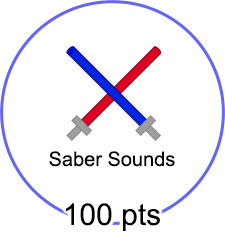
<style>
.page{position:relative;width:225px;height:236px;background:#ffffff}
.page>*{position:absolute;margin:0}
.t1{font:20px "ArialMT";color:#000000}
.t2{font:30px "ArialMT";color:#000000}
</style>
<div class="page">
<p class="t1" style="left:49px;top:151px;width:126px;height:16px">Saber Sounds</p>
<p class="t2" style="left:66px;top:203px;width:94px;height:28px">100 pts</p>
</div>
